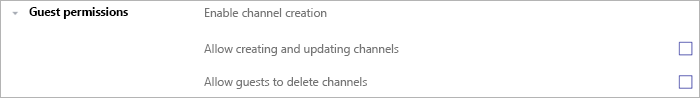
<style>
.page{position:relative;width:700px;height:98px;background:#ffffff}
.page>*{position:absolute;margin:0}
.t1{font:11.6px "SegoeUI-Bold";color:#000000}
.t2{font:11.7px "SegoeUI";color:#757575}
</style>
<div class="page">
<p class="t1" style="left:29px;top:7px;width:99px;height:12px">Guest permissions</p>
<p class="t2" style="left:205px;top:8px;width:122px;height:9px">Enable channel creation</p>
<p class="t2" style="left:204px;top:44px;width:195px;height:12px">Allow creating and updating channels</p>
<p class="t2" style="left:204px;top:77px;width:163px;height:12px">Allow guests to delete channels</p>
</div>
